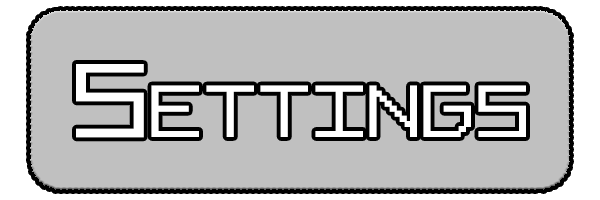
<style>
.page{position:relative;width:600px;height:200px;background:#c0c0c0}
.page>*{position:absolute;margin:0}
.t1{font:100px "PFStardust";color:#ffffff;font-variant:small-caps;font-weight:bold}
</style>
<div class="page">
<p class="t1" style="left:76px;top:64px;width:450px;height:74px">Settings</p>
</div>
